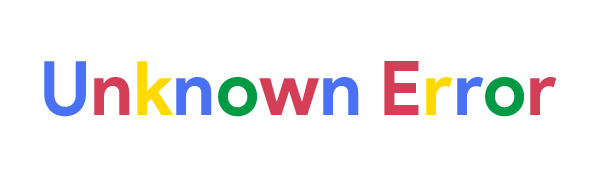
<style>
.page{position:relative;width:600px;height:177px;background:#ffffff}
.page>*{position:absolute;margin:0}
.t1{font:75px "ProductSans-Bold";color:#4a71f4}
.t2{font:75px "ProductSans-Bold";color:#d43e57}
.t3{font:75px "ProductSans-Bold";color:#ffd900}
.t4{font:75px "ProductSans-Bold";color:#009944}
</style>
<div class="page">
<p class="t1" style="left:44px;top:61px;width:513px;height:56px">U<span class="t2">n</span><span class="t3">k</span>n<span class="t4">o</span><span class="t2">w</span>n <span class="t2">E</span><span class="t3">r</span>r<span class="t4">o</span><span class="t2">r</span></p>
</div>
